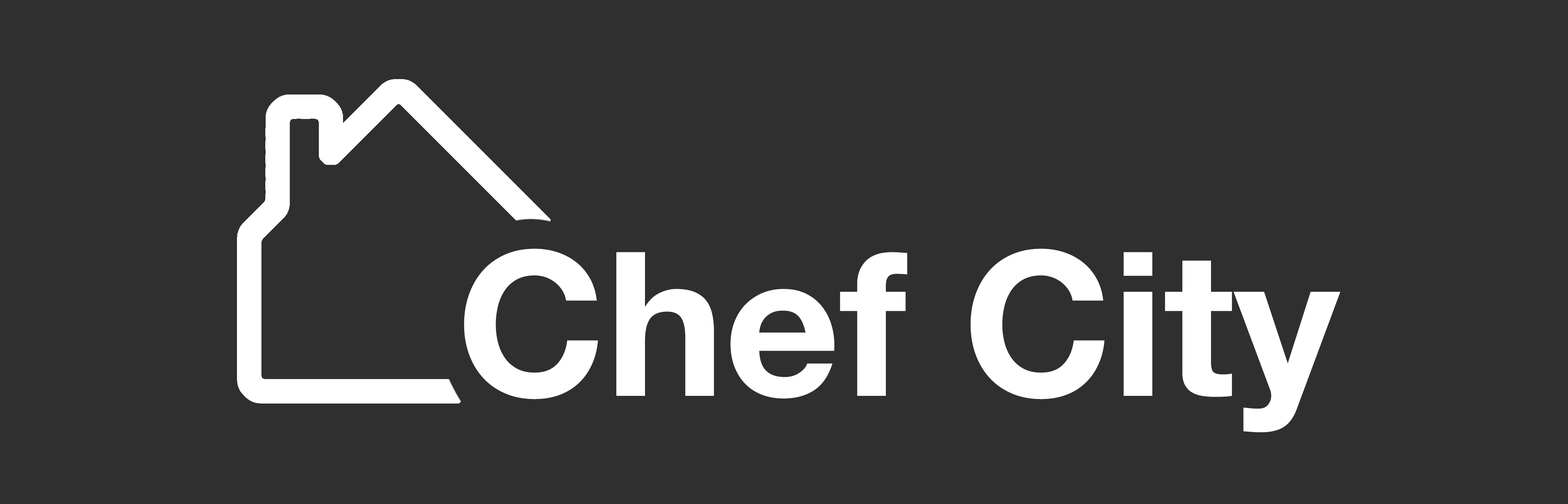
<style>
.page{position:relative;width:1568px;height:504px;background:#2f2f2f}
.page>*{position:absolute;margin:0}
.t1{font:201.1px "HelveticaNeue-Bold";color:#ffffff}
</style>
<div class="page">
<p class="t1" style="left:464px;top:248px;width:876px;height:184px">Chef City</p>
</div>
